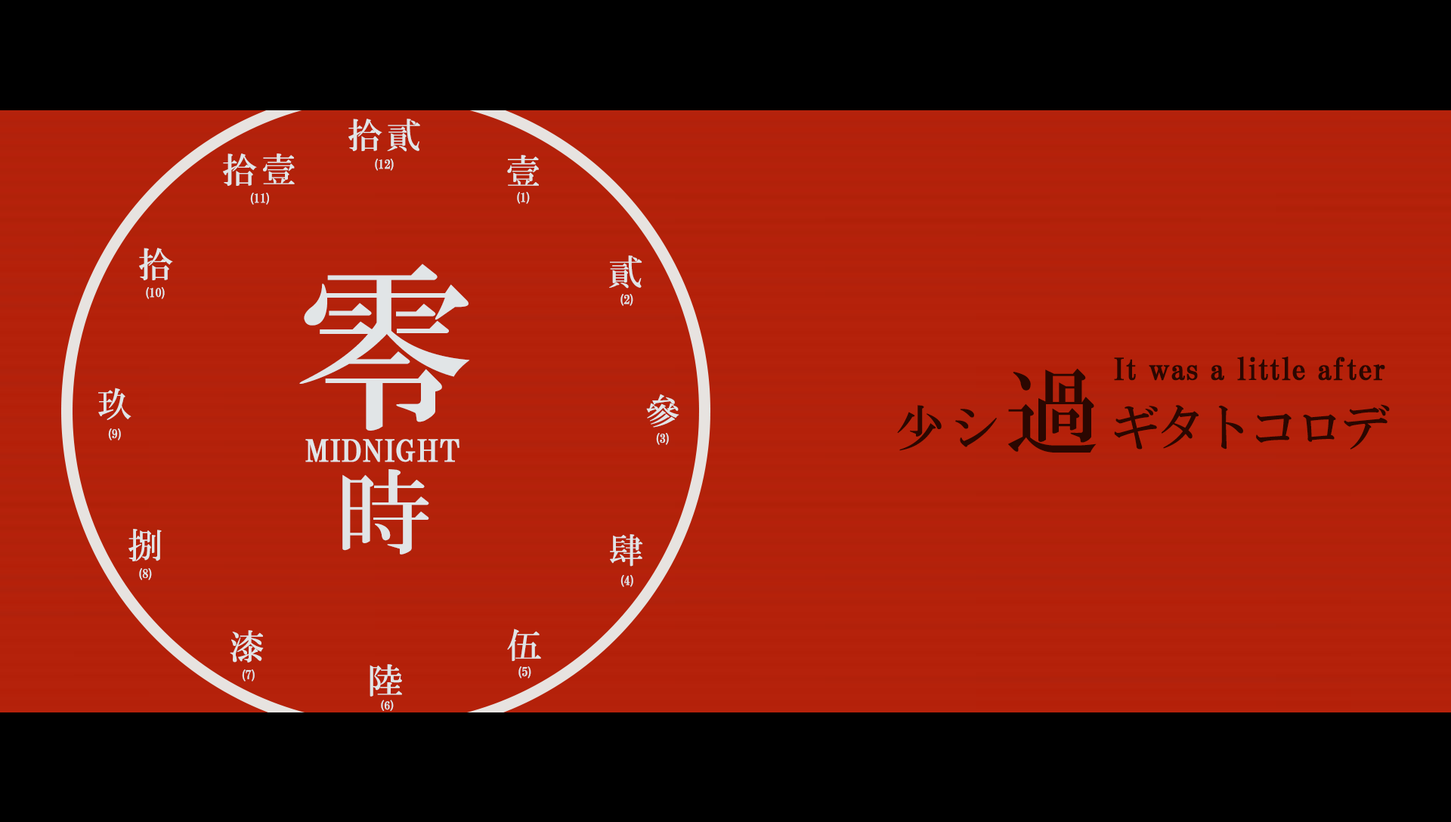
<style>
.page{position:relative;width:1451px;height:822px;background:#000000}
.page>*{position:absolute;margin:0}
.t1{font:34.8px "HGMinchoB";letter-spacing:0.12em;color:#e1e5e7}
.t2{font:12.1px "HGPMinchoB";letter-spacing:0.01em;color:#e1e5e7;text-transform:uppercase;font-weight:bold}
.t3{font:182.1px "HGMinchoB";letter-spacing:0.12em;color:#e1e5e7}
.t4{font:30.2px "HGPMinchoB";letter-spacing:0.01em;color:#2b0701;font-weight:bold}
.t5{font:49.1px "HGMinchoB";letter-spacing:-0.06em;color:#2b0701}
.t6{font:49.1px "HGMinchoB";letter-spacing:0.12em;color:#2b0701}
.t7{font:93.7px "HGMinchoB";letter-spacing:0.12em;color:#2b0701}
.t8{font:30.2px "HGPMinchoB";letter-spacing:0.01em;color:#e1e5e7;text-transform:uppercase;font-weight:bold}
.t9{font:93.7px "HGMinchoB";letter-spacing:0.12em;color:#e1e5e7}
.t10{font:10.9px "HGPMinchoB";letter-spacing:0.01em;color:#e1e5e7;text-transform:uppercase;font-weight:bold;scale:1.11 1}
</style>
<div class="page">
<p class="t1" style="left:348px;top:119px;width:72px;height:33px">拾貳</p>
<p class="t1" style="left:223px;top:153px;width:72px;height:33px">拾壹</p>
<p class="t2" style="left:375px;top:159px;width:19px;height:12px">(12)</p>
<p class="t1" style="left:507px;top:155px;width:32px;height:31px">壹</p>
<p class="t2" style="left:250px;top:193px;width:19px;height:12px">(11)</p>
<p class="t2" style="left:517px;top:192px;width:13px;height:12px">(1)</p>
<p class="t1" style="left:139px;top:248px;width:34px;height:32px">拾</p>
<p class="t1" style="left:609px;top:255px;width:33px;height:34px">貳</p>
<p class="t3" style="left:299px;top:264px;width:171px;height:167px">零</p>
<p class="t2" style="left:146px;top:287px;width:19px;height:12px">(10)</p>
<p class="t2" style="left:620px;top:294px;width:13px;height:12px">(2)</p>
<p class="t4" style="left:1114px;top:357px;width:271px;height:24px">It was a little after</p>
<p class="t5" style="left:897px;top:369px;width:492px;height:84px"><span class="t6">少シ</span><span class="t7">過</span>ギタトコロデ</p>
<p class="t1" style="left:98px;top:388px;width:33px;height:32px">玖</p>
<p class="t1" style="left:646px;top:394px;width:33px;height:34px">參</p>
<p class="t2" style="left:108px;top:428px;width:13px;height:12px">(9)</p>
<p class="t2" style="left:656px;top:433px;width:13px;height:12px">(3)</p>
<p class="t8" style="left:305px;top:439px;width:154px;height:23px">Midnight</p>
<p class="t9" style="left:342px;top:469px;width:87px;height:86px">時</p>
<p class="t1" style="left:128px;top:529px;width:34px;height:32px">捌</p>
<p class="t1" style="left:610px;top:534px;width:33px;height:33px">肆</p>
<p class="t2" style="left:139px;top:568px;width:13px;height:12px">(8)</p>
<p class="t2" style="left:620px;top:575px;width:13px;height:12px">(4)</p>
<p class="t1" style="left:507px;top:629px;width:34px;height:32px">伍</p>
<p class="t1" style="left:230px;top:630px;width:34px;height:33px">漆</p>
<p class="t1" style="left:369px;top:664px;width:33px;height:33px">陸</p>
<p class="t2" style="left:242px;top:669px;width:13px;height:12px">(7)</p>
<p class="t2" style="left:518px;top:666px;width:13px;height:12px">(5)</p>
<p class="t10" style="left:381px;top:700px;width:13px;height:11px">(6)</p>
</div>
